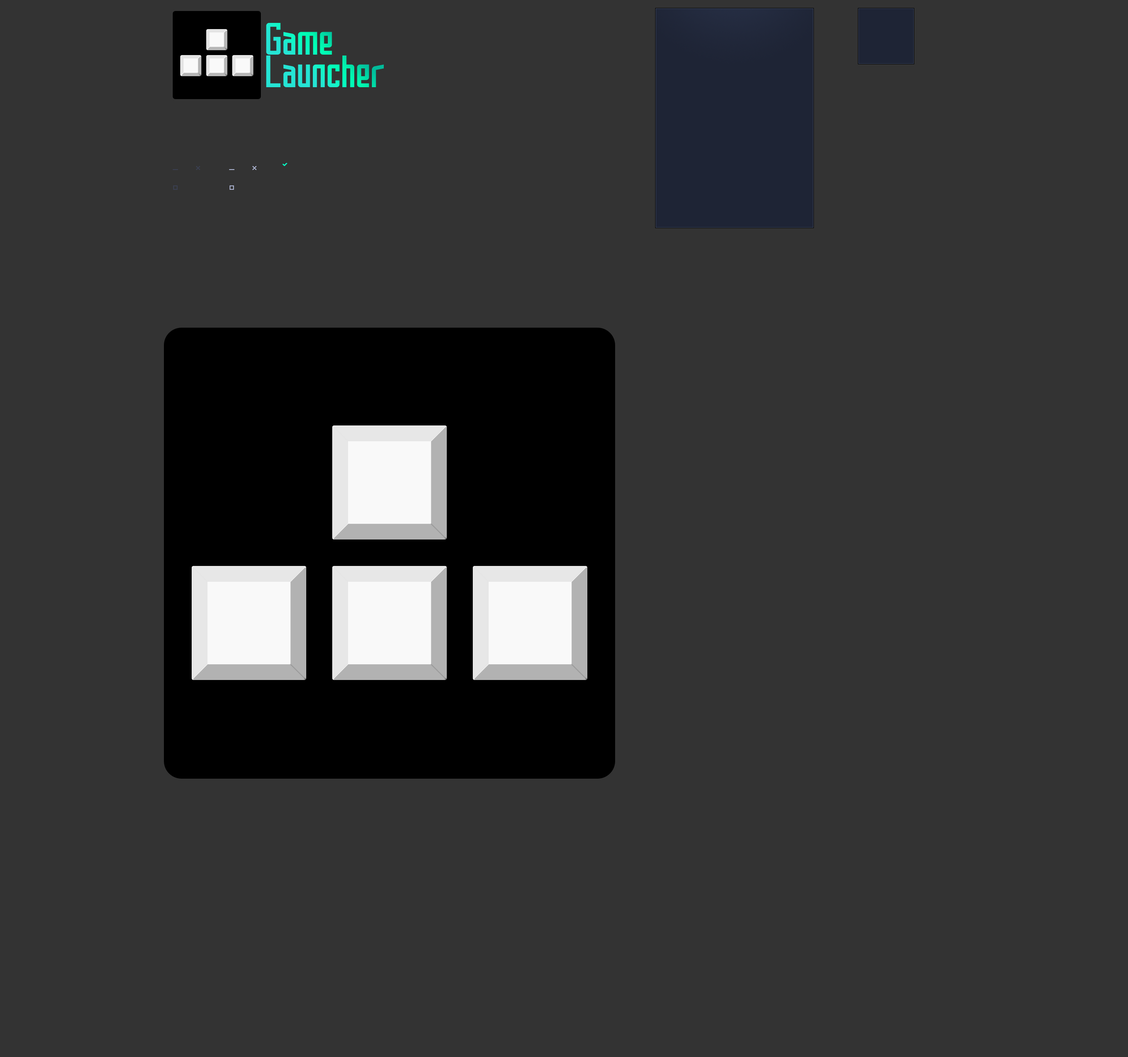
<style>
.page{position:relative;width:1128px;height:1057px;background:#333333}
.page>*{position:absolute;margin:0}
.t1{font:39.6px/32.6px "SAOUI-Regular";scale:1.05 1}
</style>
<div class="page">
<p class="t1" style="left:266px;top:23px;width:118px;height:64px">Game<br>Launcher</p>
</div>
